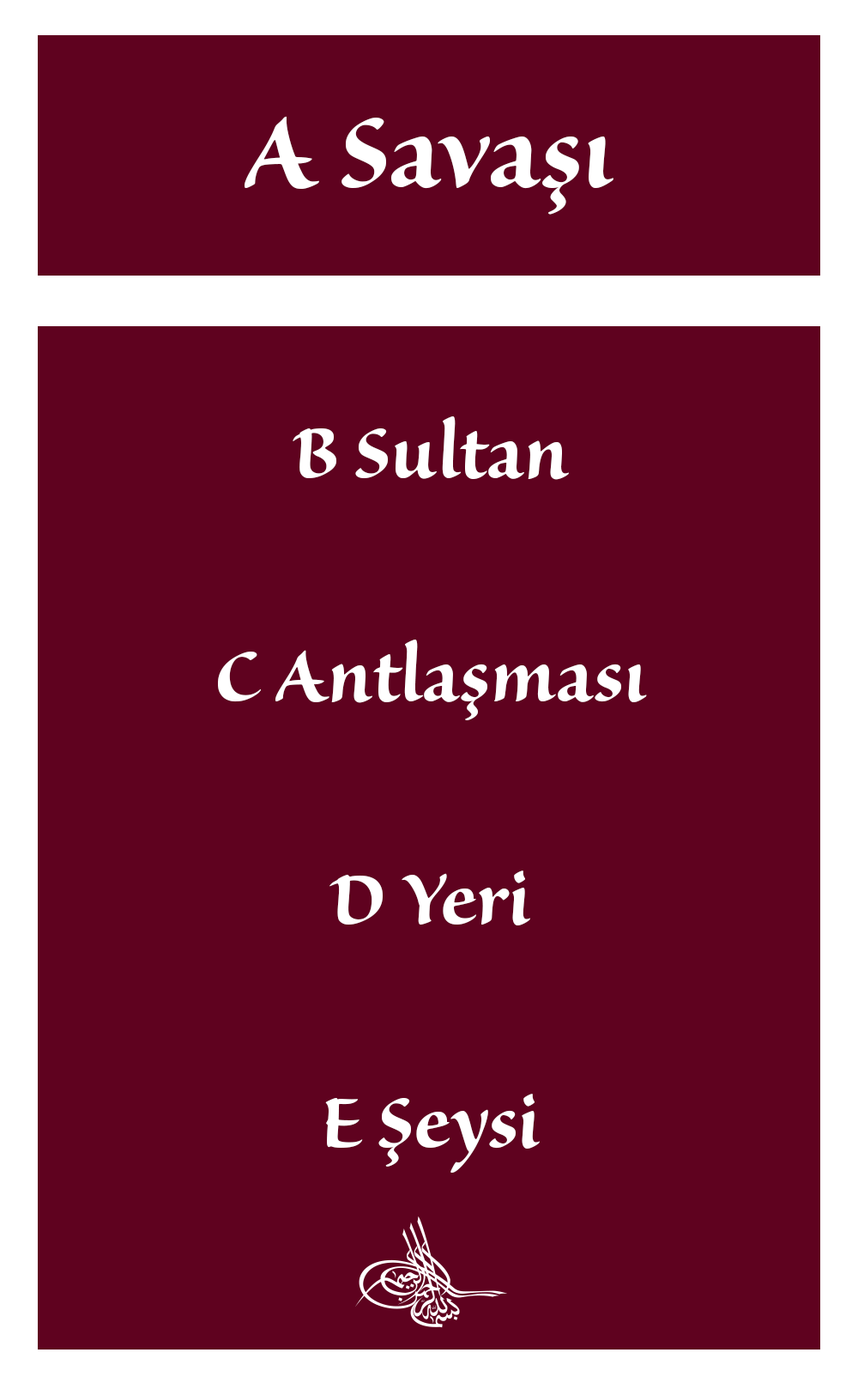
<style>
.page{position:relative;width:858px;height:1389px;background:#5f021f}
.page>*{position:absolute;margin:0}
.t1{font:128.8px "SanvitoPro-BoldDisp";color:#ffffff}
.t2{font:93px "SanvitoPro-BoldDisp";color:#ffffff}
</style>
<div class="page">
<p class="t1" style="left:245px;top:116px;width:369px;height:99px">A Savaşı</p>
<p class="t2" style="left:218px;top:416px;width:429px;height:757px;text-align:center">B Sultan<br><br>C Antlaşması<br><br>D Yeri<br><br>E Şeysi</p>
</div>
